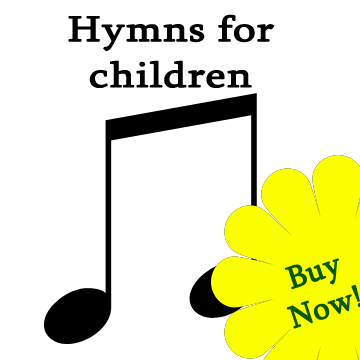
<style>
.page{position:relative;width:360px;height:360px;background:#ffffff}
.page>*{position:absolute;margin:0}
.t1{font:36.3px/45.9px "Sylfaen";letter-spacing:0.001em;color:#000000;font-weight:bold;scale:1.2 1}
</style>
<div class="page">
<p class="t1" style="left:68px;top:14px;width:207px;height:74px;text-align:center">Hymns for<br>children</p>
</div>
